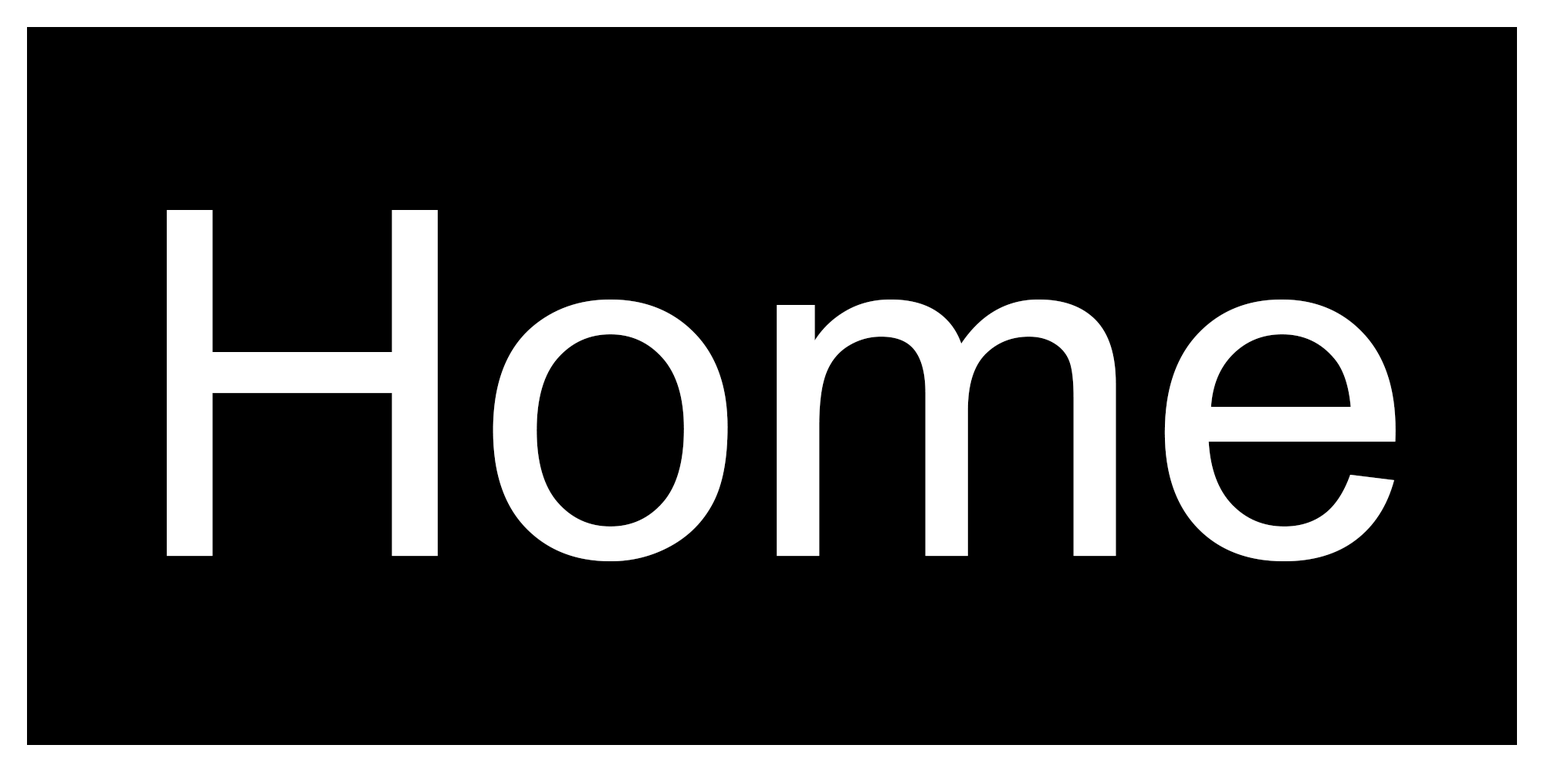
<style>
.page{position:relative;width:1544px;height:772px;background:#000000}
.page>*{position:absolute;margin:0}
.t1{font:482.6px "ArialMT";color:#ffffff}
</style>
<div class="page">
<p class="t1" style="left:167px;top:210px;width:1229px;height:351px">Home</p>
</div>
